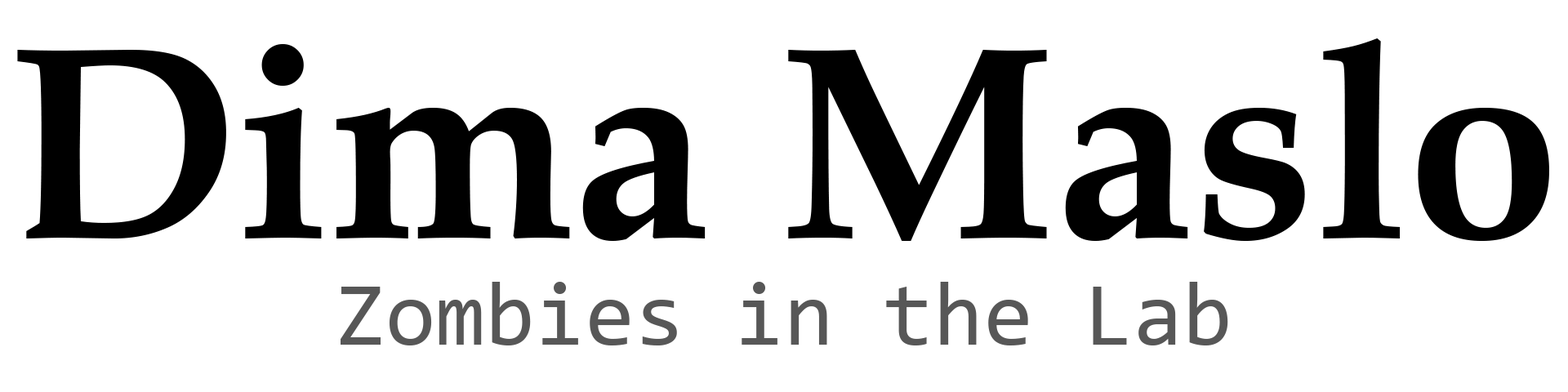
<style>
.page{position:relative;width:1568px;height:392px;background:#ffffff}
.page>*{position:absolute;margin:0}
.t1{font:275.5px "BookAntiqua-Bold";color:#000000}
.t2{font:90.6px "Consolas";color:#575757}
</style>
<div class="page">
<p class="t1" style="left:17px;top:38px;width:1532px;height:203px">Dima Maslo</p>
<p class="t2" style="left:341px;top:282px;width:887px;height:63px">Zombies in the Lab</p>
</div>
